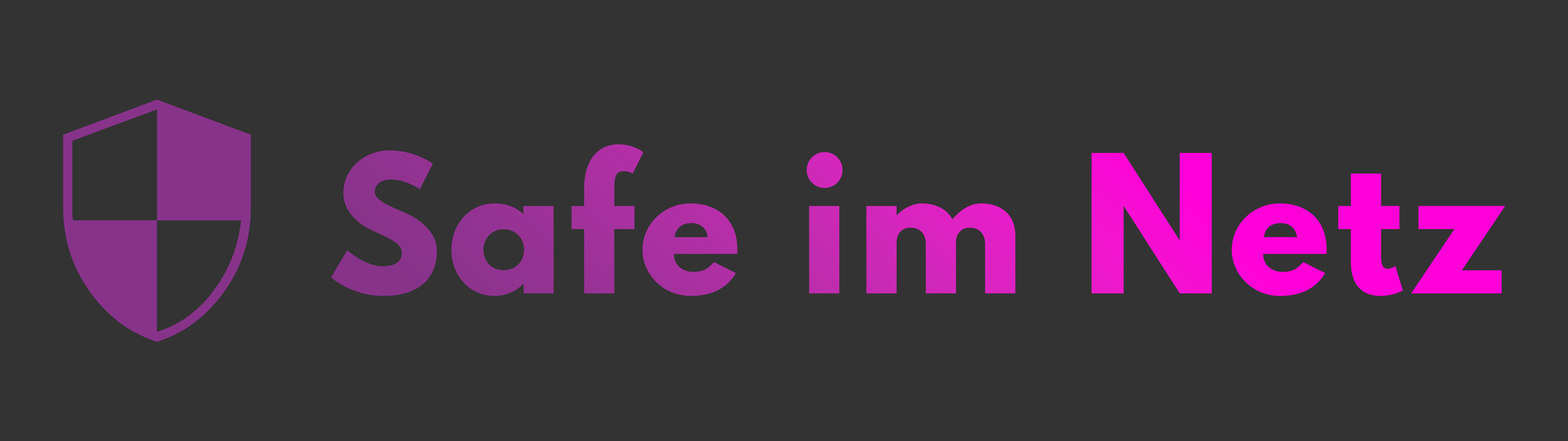
<style>
.page{position:relative;width:1568px;height:441px;background:#333333}
.page>*{position:absolute;margin:0}
.t1{font:170.1px "LeagueSpartan-Bold";letter-spacing:0.035em}
</style>
<div class="page">
<p class="t1" style="left:331px;top:144px;width:1174px;height:152px">Safe im Netz</p>
</div>
